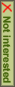
<style>
.page{position:relative;width:15px;height:87px;background:#c3cd8c}
.page>*{position:absolute;margin:0}
.t1{font:10px "Arial-BoldMT";color:#45650c}
</style>
<div class="page">
<p class="t1" style="left:3px;top:16px;width:8px;height:67px;rotate:90deg">Not interested</p>
</div>
